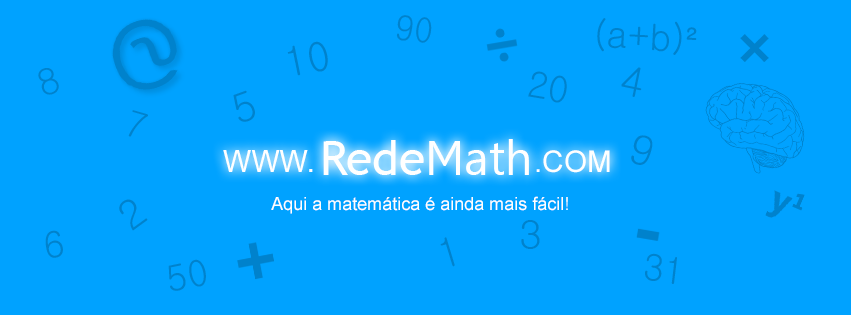
<style>
.page{position:relative;width:851px;height:315px;background:#00a2ff}
.page>*{position:absolute;margin:0}
.t1{font:34px "Gulim";color:#0082cc;scale:0.96 1}
.t2{font:36px "Gulim";color:#0082cc}
.t3{font:40px "Gulim";color:#0082cc}
.t4{font:30px "ArialMT";color:#ffffff}
.t5{font:48px "TrebuchetMS";color:#ffffff}
.t6{font:48px "Leelawadee";color:#ffffff}
.t7{font:18px "ArialMT";color:#ffffff}
</style>
<div class="page">
<p class="t1" style="left:396px;top:15px;width:36px;height:28px;rotate:7deg">90</p>
<p class="t2" style="left:597px;top:18px;width:100px;height:37px;rotate:3deg">(a+b)²</p>
<p class="t3" style="left:287px;top:41px;width:41px;height:35px;rotate:-11deg">10</p>
<p class="t2" style="left:38px;top:68px;width:21px;height:27px;rotate:-20deg">8</p>
<p class="t2" style="left:528px;top:71px;width:39px;height:32px;rotate:9deg">20</p>
<p class="t3" style="left:621px;top:67px;width:21px;height:30px;rotate:12deg">4</p>
<p class="t3" style="left:233px;top:90px;width:22px;height:32px;rotate:-20deg">5</p>
<p class="t2" style="left:128px;top:110px;width:20px;height:27px;rotate:16deg">7</p>
<p class="t3" style="left:631px;top:135px;width:22px;height:30px;rotate:15deg">9</p>
<p class="t4" style="left:223px;top:150px;width:90px;height:22px">WWW.</p>
<p class="t5" style="left:323px;top:139px;width:206px;height:36px">Rede<span class="t6">Math</span></p>
<p class="t4" style="left:536px;top:150px;width:74px;height:23px">.COM</p>
<p class="t7" style="left:271px;top:196px;width:297px;height:18px">Aqui a matemática é ainda mais fácil!</p>
<p class="t3" style="left:119px;top:199px;width:29px;height:32px;rotate:-36deg">2</p>
<p class="t3" style="left:521px;top:220px;width:19px;height:29px">3</p>
<p class="t2" style="left:45px;top:230px;width:18px;height:28px;rotate:-11deg">6</p>
<p class="t3" style="left:440px;top:237px;width:15px;height:30px;rotate:-17deg">1</p>
<p class="t2" style="left:645px;top:253px;width:32px;height:31px;rotate:7deg">31</p>
<p class="t2" style="left:168px;top:259px;width:38px;height:32px;rotate:-11deg">50</p>
</div>
